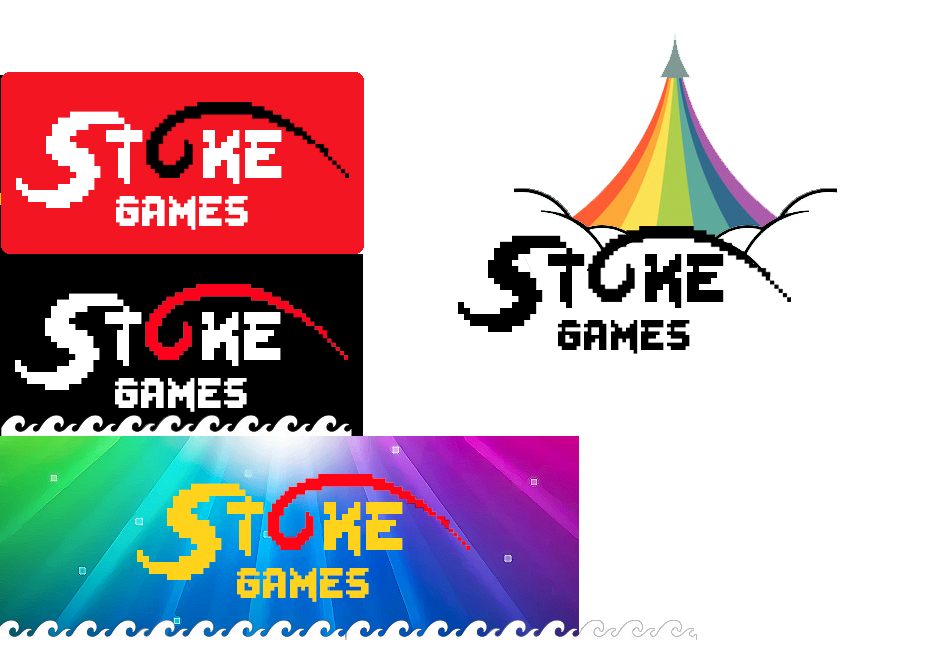
<style>
.page{position:relative;width:930px;height:655px;background:#ffffff}
.page>*{position:absolute;margin:0}
.t1{font:96.2px "Lady-Radical";color:#ffffff}
.t2{font:60px "Lady-Radical";color:#ffffff}
.t3{font:96.2px "Lady-Radical";color:#000000}
.t4{font:60px "Lady-Radical";color:#000000}
</style>
<div class="page">
<p class="t1" style="left:16px;top:111px;width:266px;height:97px">St   ke</p>
<p class="t2" style="left:116px;top:196px;width:132px;height:34px">games</p>
<p class="t3" style="left:458px;top:235px;width:266px;height:97px">St   ke</p>
<p class="t1" style="left:15px;top:293px;width:266px;height:97px">St   ke</p>
<p class="t4" style="left:558px;top:320px;width:132px;height:34px">games</p>
<p class="t2" style="left:115px;top:378px;width:132px;height:34px">games</p>
</div>
